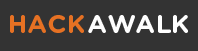
<style>
.page{position:relative;width:198px;height:51px;background:#333333}
.page>*{position:absolute;margin:0}
.t1{font:25.7px "GothamRounded-Bold";color:#ffffff}
.t2{font:25.7px "GothamRounded-Bold";color:#e67123}
</style>
<div class="page">
<p class="t1" style="left:10px;top:15px;width:178px;height:18px"><span class="t2">HACK </span>AWALK</p>
</div>
